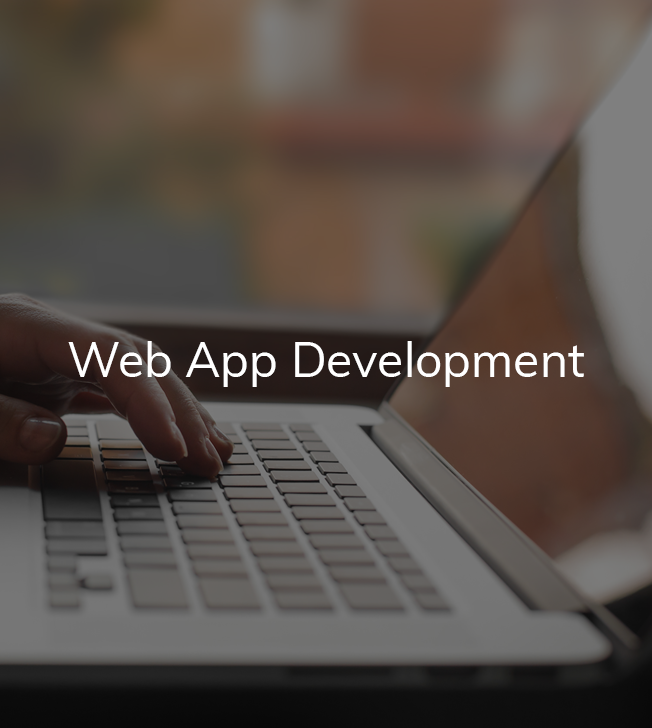
<style>
.page{position:relative;width:652px;height:728px}
.page>*{position:absolute;margin:0}
.t1{font:48px "Muli-Regular";color:#ffffff}
</style>
<div class="page">
<p class="t1" style="left:68px;top:341px;width:516px;height:46px">Web App Development</p>
</div>
